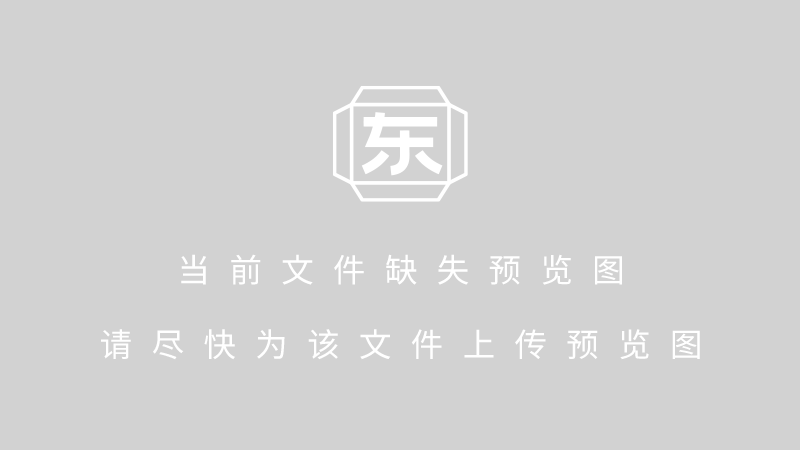
<style>
.page{position:relative;width:800px;height:450px;background:#d2d2d2}
.page>*{position:absolute;margin:0}
.t1{font:32.4px/74.6px "SourceHanSansVF-Regular";letter-spacing:0.6em;color:#ffffff;text-transform:uppercase}
</style>
<div class="page">
<p class="t1" style="left:101px;top:254px;width:599px;height:106px;text-align:center">当前文件缺失预览图<br>请尽快为该文件上传预览图</p>
</div>
